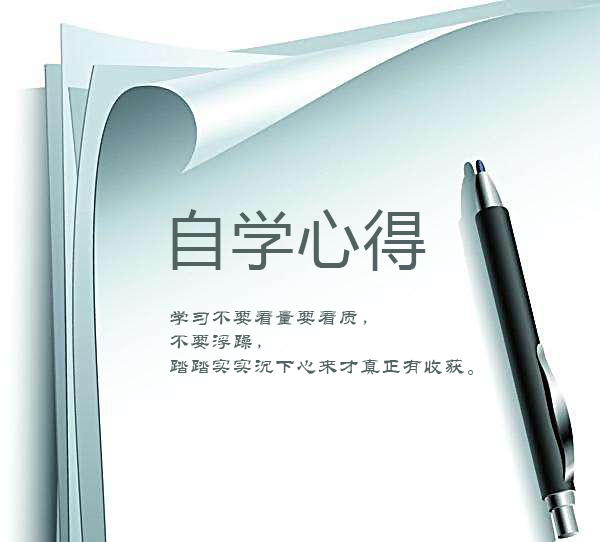
<style>
.page{position:relative;width:600px;height:542px;background:#ffffff}
.page>*{position:absolute;margin:0}
.t1{font:63.4px "MicrosoftYaHei";letter-spacing:0.04em;color:#526262}
.t2{font:20.4px "STLiti";letter-spacing:0.04em;color:#526262}
</style>
<div class="page">
<p class="t1" style="left:172px;top:209px;width:254px;height:62px">自学心得</p>
<p class="t2" style="left:170px;top:310px;width:304px;height:65px">学习不要看量要看质，<br>不要浮躁，<br>踏踏实实沉下心来才真正有收获。</p>
</div>
